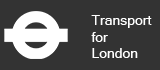
<style>
.page{position:relative;width:160px;height:70px;background:#333333}
.page>*{position:absolute;margin:0}
.t1{font:14px "MicrosoftSansSerif";color:#ffffff}
</style>
<div class="page">
<p class="t1" style="left:91px;top:15px;width:61px;height:43px">Transport<br>for<br>London</p>
</div>
